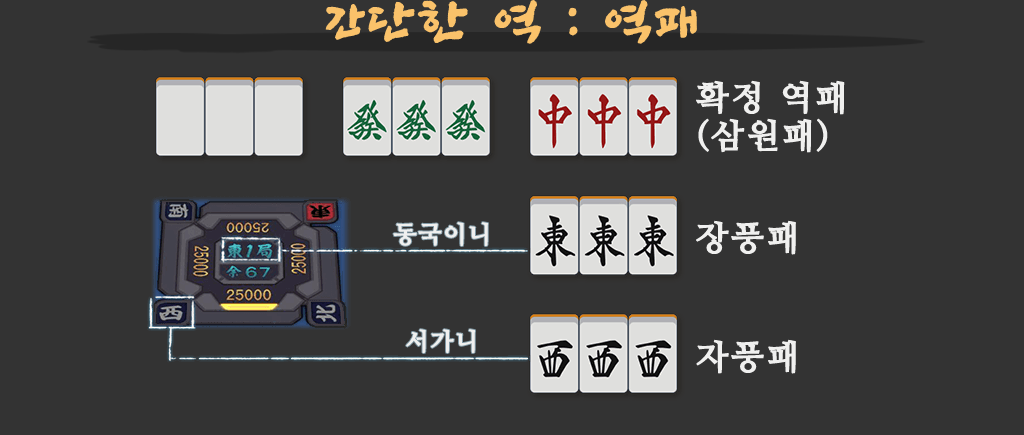
<style>
.page{position:relative;width:1024px;height:435px;background:#333333}
.page>*{position:absolute;margin:0}
.t1{font:48px "SangSangRockOTF";letter-spacing:0.06em;color:#fac26a;font-weight:bold}
.t2{font:34px "NanumMyeongjoBold";letter-spacing:0.06em;color:#f0f0ef;font-weight:bold}
.t3{font:24px "NanumMyeongjoBold";letter-spacing:0.06em;color:#f0f0ef;font-weight:bold}
</style>
<div class="page">
<p class="t1" style="left:325px;top:0px;width:372px;height:44px">간단한 역 : 역패</p>
<p class="t2" style="left:696px;top:80px;width:149px;height:35px">확정 역패</p>
<p class="t2" style="left:698px;top:118px;width:130px;height:35px">(삼원패)</p>
<p class="t3" style="left:393px;top:222px;width:95px;height:24px">동국이니</p>
<p class="t2" style="left:696px;top:220px;width:100px;height:35px">장풍패</p>
<p class="t3" style="left:406px;top:329px;width:69px;height:24px">서가니</p>
<p class="t2" style="left:696px;top:339px;width:100px;height:35px">자풍패</p>
</div>
